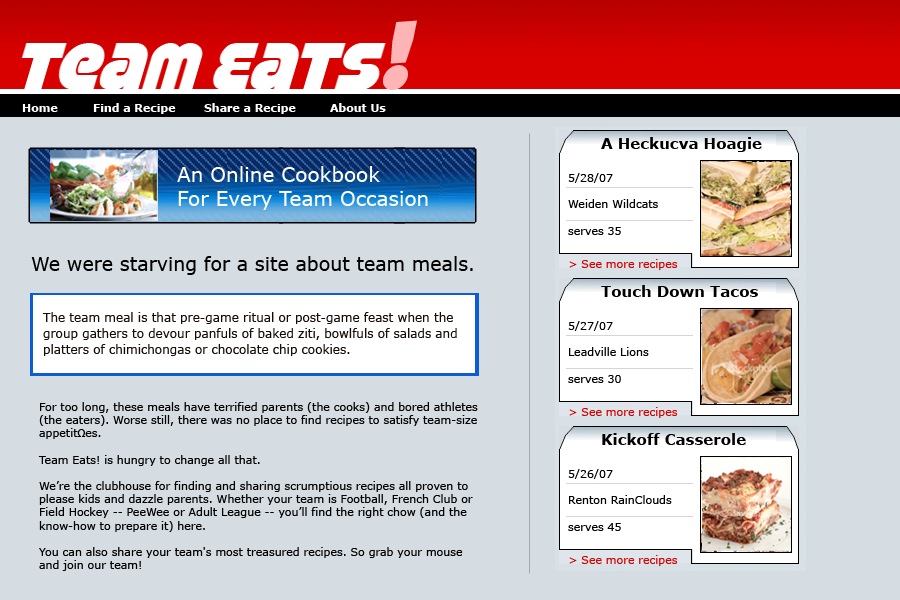
<style>
.page{position:relative;width:900px;height:600px;background:#d6dde2}
.page>*{position:absolute;margin:0}
.t1{font:100.9px "Strenuous";color:#ffb5b5;scale:0.97 1}
.t2{font:11px "Verdana-Bold";color:#fdfdfd}
.t3{font:11px "Verdana-Bold";color:#ffffff}
.t4{font:15px "Verdana-Bold";color:#000000}
.t5{font:20px "Verdana";color:#ffffff}
.t6{font:11px "Verdana";color:#000000}
.t7{font:19px "Verdana";color:#000000}
.t8{font:11px "Verdana";color:#d90000}
.t9{font:12px/16px "Verdana";color:#170d06}
.t10{font:11px "MyriadPro-Regular";color:#000000}
</style>
<div class="page">
<p class="t1" style="left:383px;top:20px;width:34px;height:70px;rotate:-4deg">!</p>
<p class="t2" style="left:22px;top:104px;width:36px;height:8px">Home</p>
<p class="t3" style="left:93px;top:103px;width:83px;height:11px">Find a Recipe</p>
<p class="t3" style="left:204px;top:103px;width:92px;height:11px">Share a Recipe</p>
<p class="t3" style="left:330px;top:103px;width:56px;height:9px">About Us</p>
<p class="t4" style="left:601px;top:137px;width:161px;height:15px">A Heckucva Hoagie</p>
<p class="t5" style="left:177px;top:166px;width:251px;height:44px">An Online Cookbook<br>For Every Team Occasion</p>
<p class="t6" style="left:568px;top:173px;width:90px;height:62px">5/28/07<br><br>Weiden Wildcats<br><br>serves 35</p>
<p class="t7" style="left:31px;top:256px;width:442px;height:19px">We were starving for a site about team meals.</p>
<p class="t8" style="left:569px;top:259px;width:109px;height:11px">&gt; See more recipes</p>
<p class="t4" style="left:601px;top:285px;width:157px;height:12px">Touch Down Tacos</p>
<p class="t9" style="left:42px;top:312px;width:415px;height:44px">The team meal is that pre-game ritual or post-game feast when the group gathers to devour panfuls of baked ziti, bowlfuls of salads and platters of chimichongas or chocolate chip cookies.</p>
<p class="t6" style="left:568px;top:321px;width:81px;height:62px">5/27/07<br><br>Leadville Lions<br><br>serves 30</p>
<p class="t6" style="left:38px;top:402px;width:440px;height:169px">For too long, these meals have terrified parents (the cooks) and bored athletes (the eaters). Worse still, there was no place to find recipes to satisfy team-size appetit<span class="t10">Ω</span>es. <br><br>Team Eats! is hungry to change all that.<br><br>We’re the clubhouse for finding and sharing scrumptious recipes all proven to please kids and dazzle parents. Whether your team is Football, French Club or Field Hockey -- PeeWee or Adult League -- you’ll find the right chow (and the know-how to prepare it) here. <br><br>You can also share your team's most treasured recipes. So grab your mouse and join our team!</p>
<p class="t8" style="left:569px;top:407px;width:109px;height:11px">&gt; See more recipes</p>
<p class="t4" style="left:602px;top:433px;width:144px;height:12px">Kickoff Casserole</p>
<p class="t6" style="left:568px;top:469px;width:104px;height:62px">5/26/07<br><br>Renton RainClouds<br><br>serves 45</p>
<p class="t8" style="left:569px;top:555px;width:109px;height:11px">&gt; See more recipes</p>
</div>
